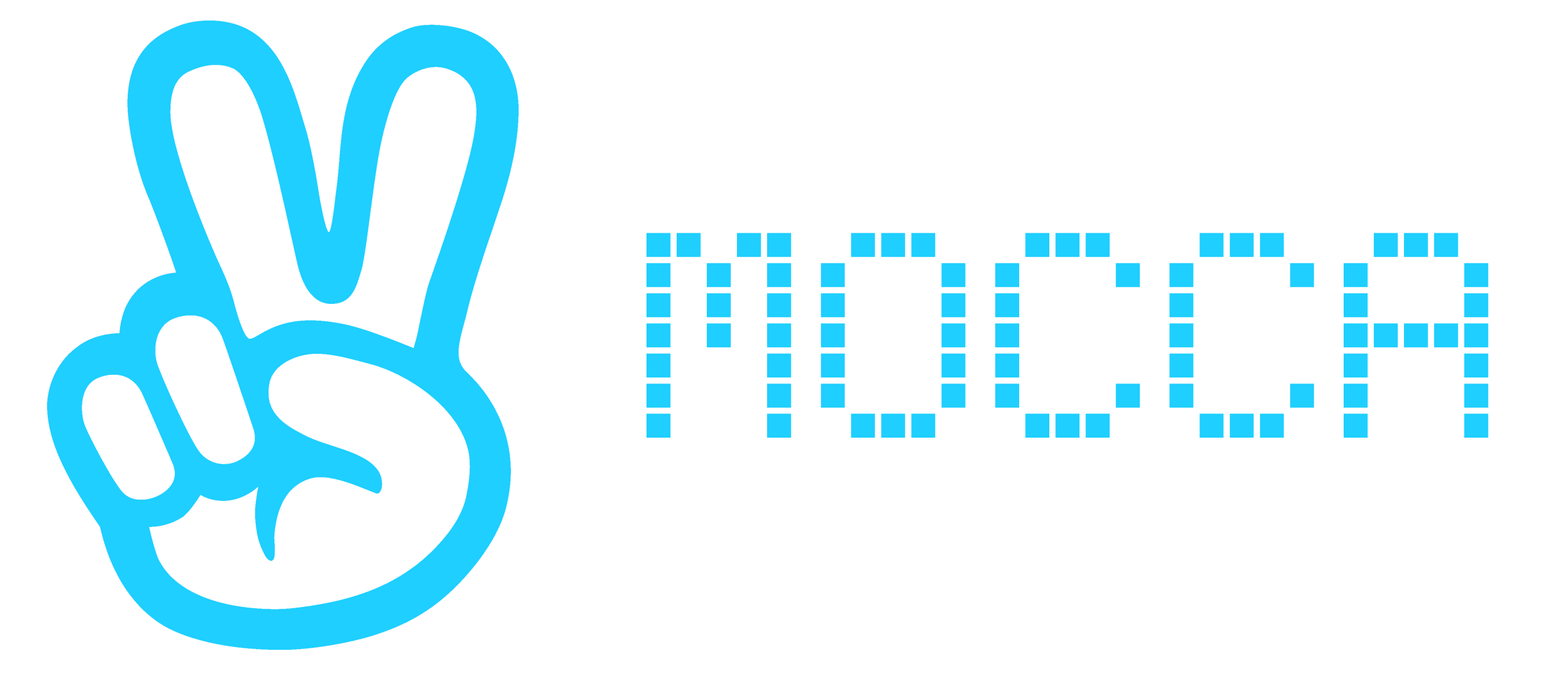
<style>
.page{position:relative;width:1568px;height:683px;background:#ffffff}
.page>*{position:absolute;margin:0}
.t1{font:241.2px "SubwayTicker";color:#1ecfff}
</style>
<div class="page">
<p class="t1" style="left:646px;top:233px;width:842px;height:205px">MOCCA</p>
</div>
